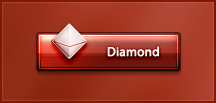
<style>
.page{position:relative;width:216px;height:103px}
.page>*{position:absolute;margin:0}
.t1{font:13px "MyriadPro-Regular";color:#fffffe;font-weight:bold}
</style>
<div class="page">
<p class="t1" style="left:107px;top:46px;width:52px;height:11px">Diamond</p>
</div>
